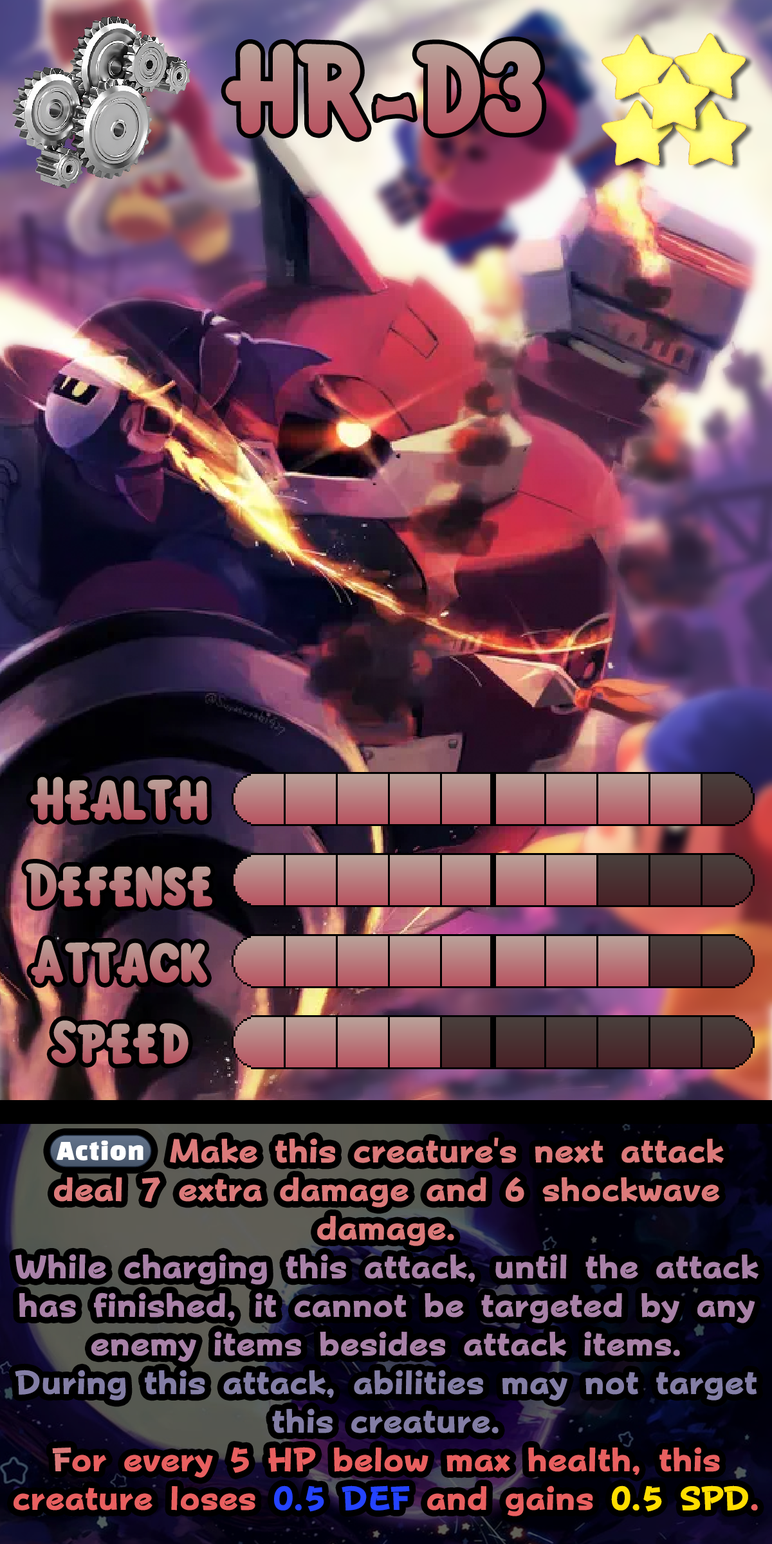
<style>
.page{position:relative;width:772px;height:1544px}
.page>*{position:absolute;margin:0}
.t1{font:194.3px "KirbyClassic"}
.t2{font:194.3px "bBambooGrove"}
.t3{font:92.7px "KirbyClassic"}
.t4{font:56.6px/38.6px "FOTPopHappinessStrp-ExtraBold";color:#a881a7}
.t5{font:33px/38.6px "stoogedings-Regular";color:#db7a7a}
.t6{font:56.6px/38.6px "FOTPopHappinessStrp-ExtraBold";color:#db7a7a}
.t7{font:56.6px/38.6px "FOTPopHappinessStrp-ExtraBold";color:#837ea5}
.t8{font:56.6px/38.6px "FOTPopHappinessStrp-ExtraBold";color:#e86060}
.t9{font:56.6px/38.6px "FOTPopHappinessStrp-ExtraBold";color:#2443ff}
.t10{font:56.6px/38.6px "FOTPopHappinessStrp-ExtraBold";color:#ffde00}
</style>
<div class="page">
<p class="t1" style="left:225px;top:41px;width:317px;height:97px">HR<span class="t2">-</span>D3</p>
<p class="t3" style="left:30px;top:777px;width:178px;height:44px">Health</p>
<p class="t3" style="left:26px;top:864px;width:186px;height:44px">Defense</p>
<p class="t3" style="left:31px;top:939px;width:176px;height:45px">Attack</p>
<p class="t3" style="left:51px;top:1021px;width:138px;height:43px">Speed</p>
<p class="t4" style="left:14px;top:1135px;width:745px;height:382px;text-align:center"><span class="t5">(Action)</span><span class="t6"> Make this creature's next attack deal 7 extra damage and 6 shockwave damage.<br></span>While charging this attack, until the attack has finished, it cannot be targeted by any enemy items besides attack items.<br><span class="t7">During this attack, abilities may not target this creature.<br></span><span class="t6">F</span><span class="t8">or every 5 HP below max health, this creature loses </span><span class="t9">0.5 DEF</span><span class="t8"> and gains </span><span class="t10">0.5 SPD</span><span class="t8">.</span></p>
</div>
